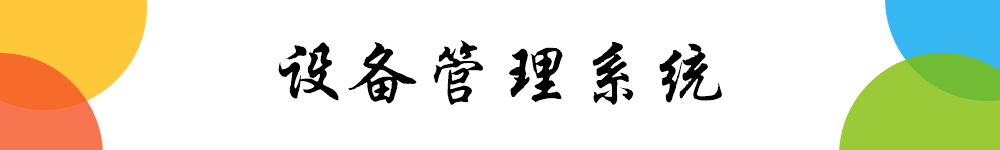
<style>
.page{position:relative;width:1000px;height:150px;background:#ffffff}
.page>*{position:absolute;margin:0}
.t1{font:76.2px "SingkaiCSEG-Bold-GB";color:#000000}
</style>
<div class="page">
<p class="t1" style="left:278px;top:40px;width:444px;height:65px">设备管理系统</p>
</div>
